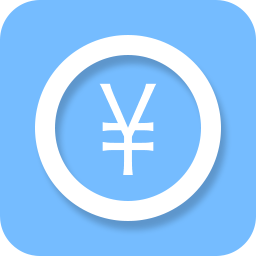
<style>
.page{position:relative;width:256px;height:256px;background:#75bcff}
.page>*{position:absolute;margin:0}
.t1{font:120px "HiraginoSansGB-W3";color:#ffffff}
</style>
<div class="page">
<p class="t1" style="left:99px;top:83px;width:58px;height:92px">￥</p>
</div>
